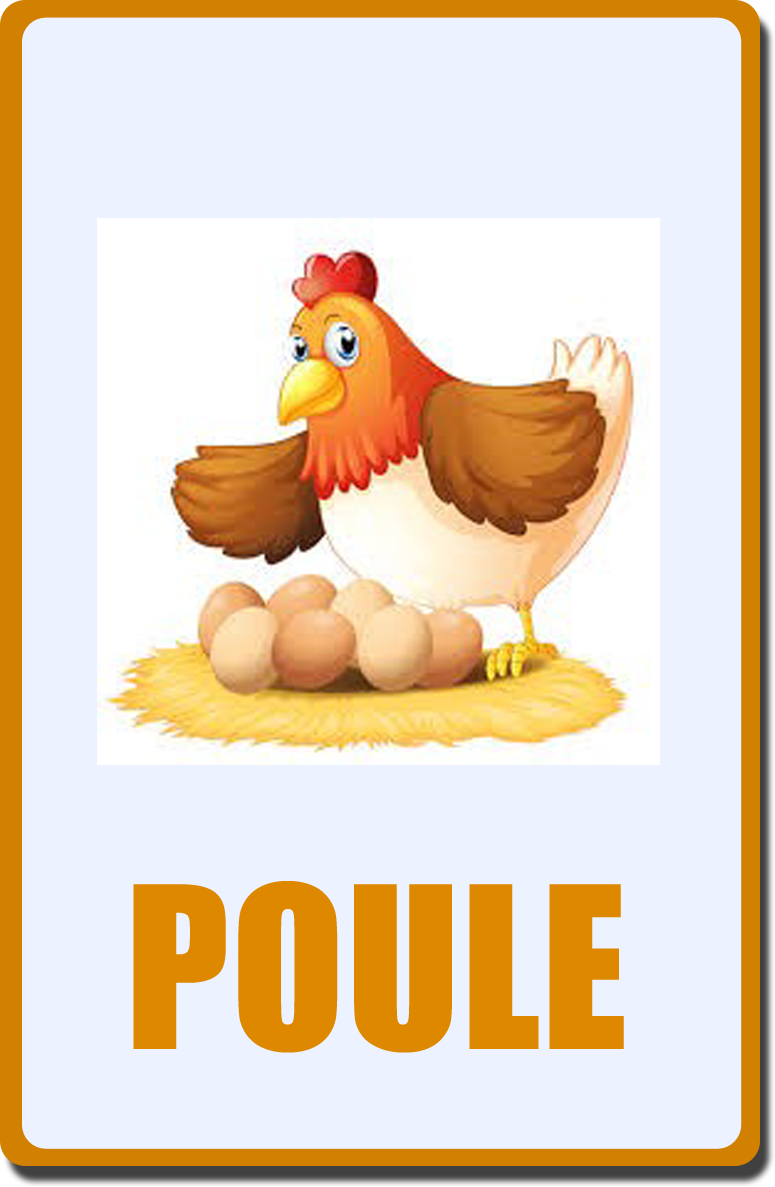
<style>
.page{position:relative;width:775px;height:1187px;background:#ecf2ff}
.page>*{position:absolute;margin:0}
.t1{font:208.3px "Impact";letter-spacing:0.005em;color:#de8800}
</style>
<div class="page">
<p class="t1" style="left:133px;top:881px;width:491px;height:172px">POULE</p>
</div>
